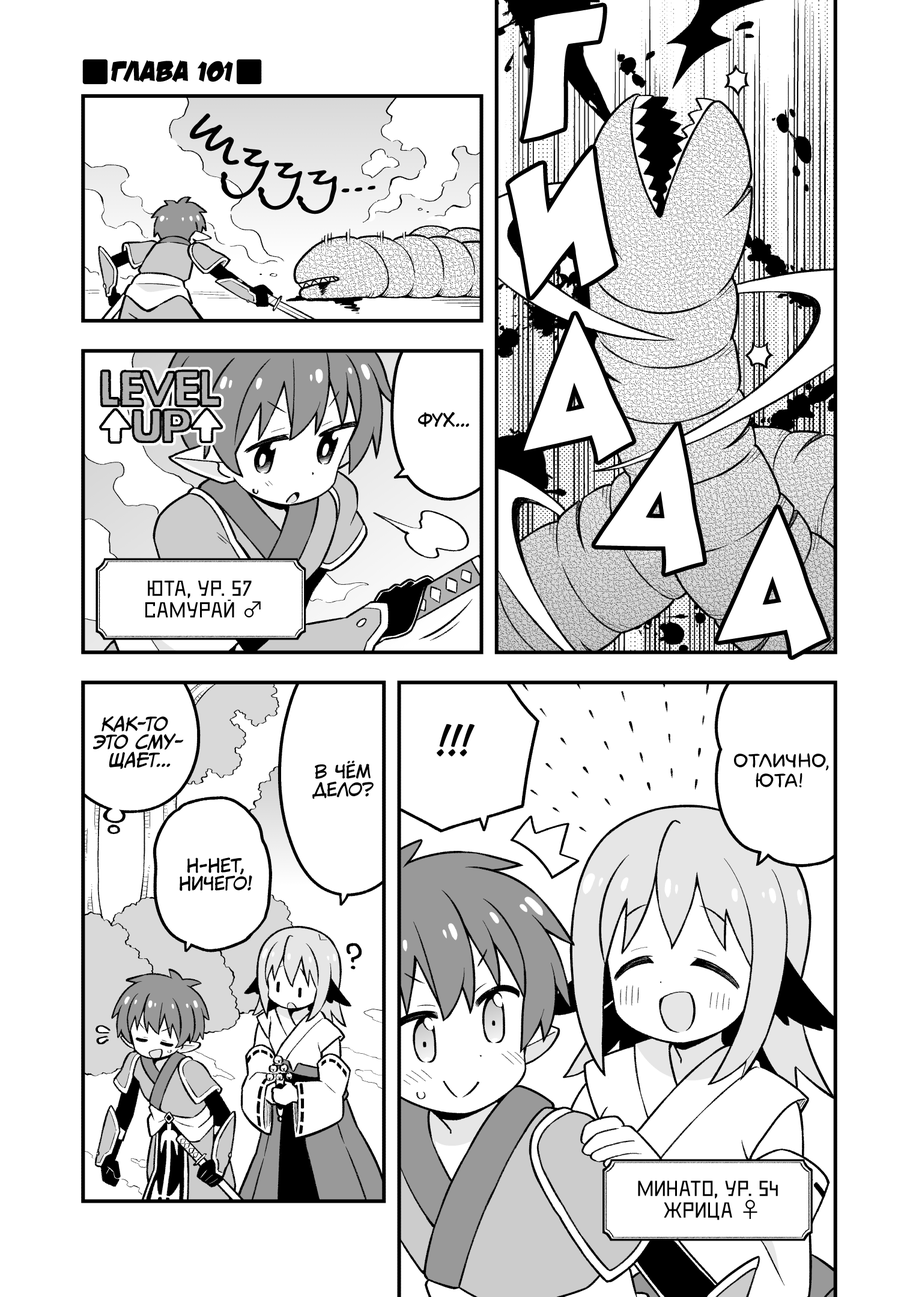
<style>
.page{position:relative;width:919px;height:1297px;background:#ffffff}
.page>*{position:absolute;margin:0}
.t1{font:162.2px "v_CCRatatatat";color:#ffffff}
.t2{font:28.8px "v_DamnNoisyKids";color:#000000;text-transform:uppercase}
.t3{font:66.1px "BetinaScriptC";color:#000000}
.t4{font:18px "KuraiVoice2";color:#000000;text-transform:uppercase}
.t5{font:21.6px "DeadMetroC";color:#000000;text-transform:uppercase}
.t6{font:21.6px "KozGoPr6N-Regular";color:#000000;text-transform:uppercase}
.t7{font:18px "CCMeanwhile";color:#000000;text-transform:uppercase;font-style:italic}
.t8{font:39.6px "v_CCJeffCampbell";color:#000000;text-transform:uppercase}
.t9{font:19.8px "laCartoonerie";color:#000000;text-transform:uppercase}
</style>
<div class="page">
<p class="t1" style="left:523px;top:7px;width:80px;height:133px;rotate:6deg">г</p>
<p class="t2" style="left:111px;top:60px;width:122px;height:22px">Глава 101</p>
<p class="t3" style="left:187px;top:114px;width:188px;height:100px;rotate:18deg">шууу...</p>
<p class="t1" style="left:509px;top:148px;width:105px;height:149px;rotate:-11deg">и</p>
<p class="t1" style="left:524px;top:315px;width:109px;height:146px">а</p>
<p class="t4" style="left:418px;top:412px;width:51px;height:16px">Фух...</p>
<p class="t1" style="left:595px;top:425px;width:108px;height:149px;rotate:14deg">а</p>
<p class="t1" style="left:718px;top:509px;width:109px;height:148px;rotate:4deg">а</p>
<p class="t5" style="left:145px;top:581px;width:116px;height:37px;text-align:center">Юта, ур. 57<br>Самурай <span class="t6">♂</span></p>
<p class="t7" style="left:93px;top:716px;width:91px;height:53px;text-align:center">Как-то<br>это сму-<br>щает...</p>
<p class="t8" style="left:437px;top:724px;width:38px;height:33px">!!!</p>
<p class="t4" style="left:312px;top:760px;width:62px;height:40px;text-align:center">В чём<br>дело?</p>
<p class="t9" style="left:734px;top:753px;width:95px;height:35px;text-align:center">Отлично,<br>Юта!</p>
<p class="t4" style="left:180px;top:858px;width:72px;height:33px;text-align:center">Н-нет,<br>ничего!</p>
<p class="t5" style="left:638px;top:1181px;width:140px;height:40px;text-align:center">Минато, ур. 54<br>Жрица <span class="t6">♀</span></p>
</div>
